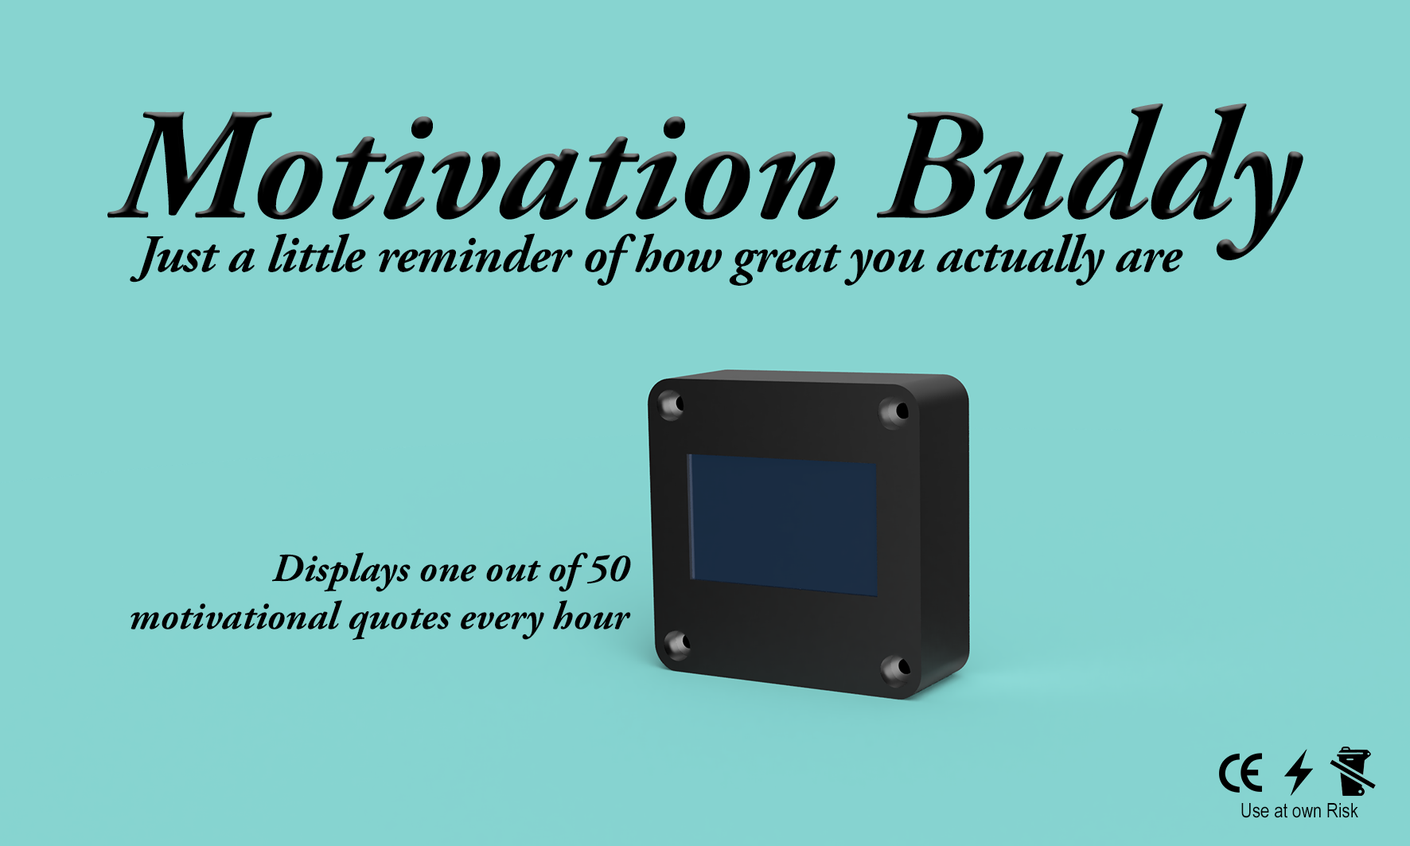
<style>
.page{position:relative;width:1410px;height:846px;background:#87d4d0}
.page>*{position:absolute;margin:0}
.t1{font:159.1px "AGaramondPro-BoldItalic";color:#000000}
.t2{font:53px "AGaramondPro-BoldItalic";letter-spacing:-0.01em;color:#000000}
.t3{font:39.8px "AGaramondPro-BoldItalic";color:#000000}
.t4{font:19.9px "ArialNarrow";color:#000000}
</style>
<div class="page">
<p class="t1" style="left:107px;top:103px;width:1196px;height:157px">Motivation Buddy</p>
<p class="t2" style="left:130px;top:233px;width:1053px;height:53px">Just a little reminder of how great you actually are</p>
<p class="t3" style="left:130px;top:552px;width:501px;height:88px;text-align:right">Displays one out of 50<br>motivational quotes every hour</p>
<p class="t4" style="left:1241px;top:803px;width:117px;height:15px">Use at own Risk</p>
</div>
